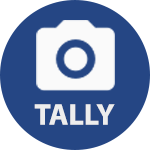
<style>
.page{position:relative;width:150px;height:150px;background:#254684}
.page>*{position:absolute;margin:0}
.t1{font:30px "MyriadPro-Bold";color:#ededed}
</style>
<div class="page">
<p class="t1" style="left:34px;top:104px;width:81px;height:21px">TALLY</p>
</div>
